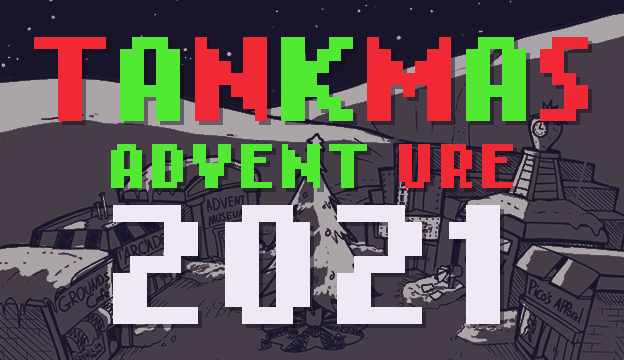
<style>
.page{position:relative;width:624px;height:360px;background:#463d49}
.page>*{position:absolute;margin:0}
.t1{font:96px "NokiaCellphoneFC-Small";letter-spacing:0.025em}
.t2{font:50px/66.7px "NokiaCellphoneFC-Small";letter-spacing:0.075em;color:#2fff00}
.t3{font:72px/66.7px "NokiaCellphoneFC-Small";letter-spacing:0.075em;color:#ff0202}
.t4{font:50px/66.7px "NokiaCellphoneFC-Small";letter-spacing:0.075em;color:#ff0202}
.t5{font:136px/136px "NokiaCellphoneFC-Small";letter-spacing:0.075em;color:#ffffff}
</style>
<div class="page">
<p class="t1" style="left:34px;top:37px;width:554px;height:84px">TANKMAS</p>
<p class="t2" style="left:111px;top:144px;width:402px;height:180px;text-align:center"><span class="t3"><br></span>ADVENT <span class="t4">URE<br></span><span class="t5">2021</span></p>
</div>
